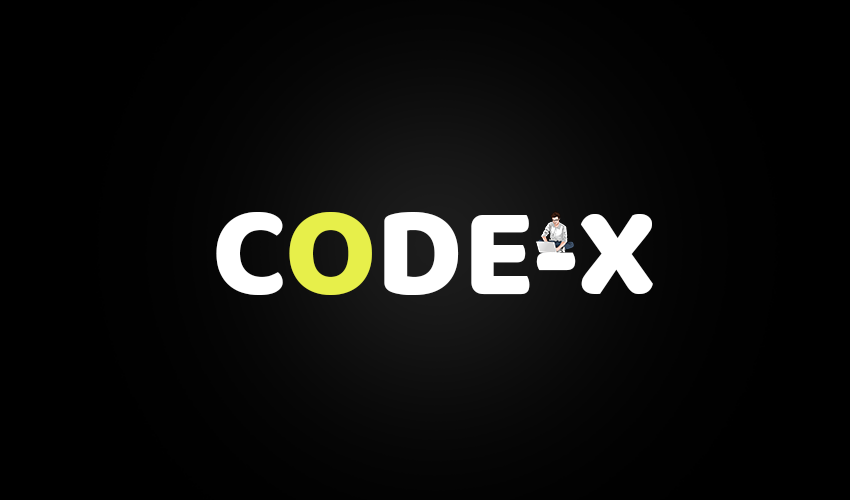
<style>
.page{position:relative;width:850px;height:500px;background:#000000}
.page>*{position:absolute;margin:0}
.t1{font:130px "BalooThambi-Regular";color:#ffffff}
.t2{font:130px "BalooThambi-Regular";color:#e7ef4a}
</style>
<div class="page">
<p class="t1" style="left:216px;top:212px;width:437px;height:83px">C<span class="t2">O</span>DE-X</p>
</div>
